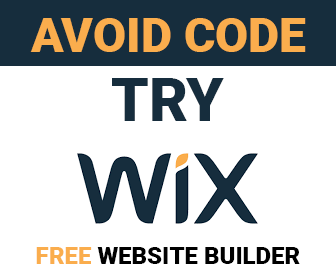
<style>
.page{position:relative;width:336px;height:280px;background:#ffffff}
.page>*{position:absolute;margin:0}
.t1{font:48px "Roboto-Black";color:#faad4d}
.t2{font:60px "Roboto-Black";color:#162d3d}
.t3{font:24px "Roboto-Black";color:#000000}
.t4{font:24px "Roboto-Black";color:#faad4d}
</style>
<div class="page">
<p class="t1" style="left:30px;top:18px;width:276px;height:34px">AVOID CODE</p>
<p class="t2" style="left:112px;top:78px;width:112px;height:43px">TRY</p>
<p class="t3" style="left:36px;top:247px;width:264px;height:17px"><span class="t4">FREE</span> WEBSITE BUILDER</p>
</div>
